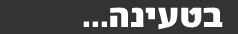
<style>
.page{position:relative;width:238px;height:34px;background:#333333}
.page>*{position:absolute;margin:0}
.t1{font:40px "FbAlbatros-Black";color:#ffffff}
</style>
<div class="page">
<p class="t1" style="left:83px;top:7px;width:140px;height:23px">בטעינה...</p>
</div>
